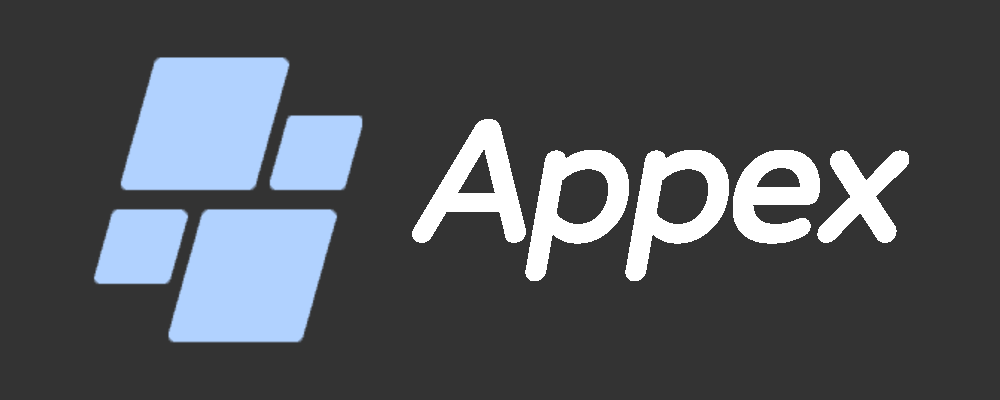
<style>
.page{position:relative;width:1000px;height:400px;background:#333333}
.page>*{position:absolute;margin:0}
.t1{font:166.7px "VarelaRound-Regular";letter-spacing:-0.06em;color:#ffffff;font-weight:bold;font-style:italic}
</style>
<div class="page">
<p class="t1" style="left:412px;top:119px;width:497px;height:162px">Appex</p>
</div>
